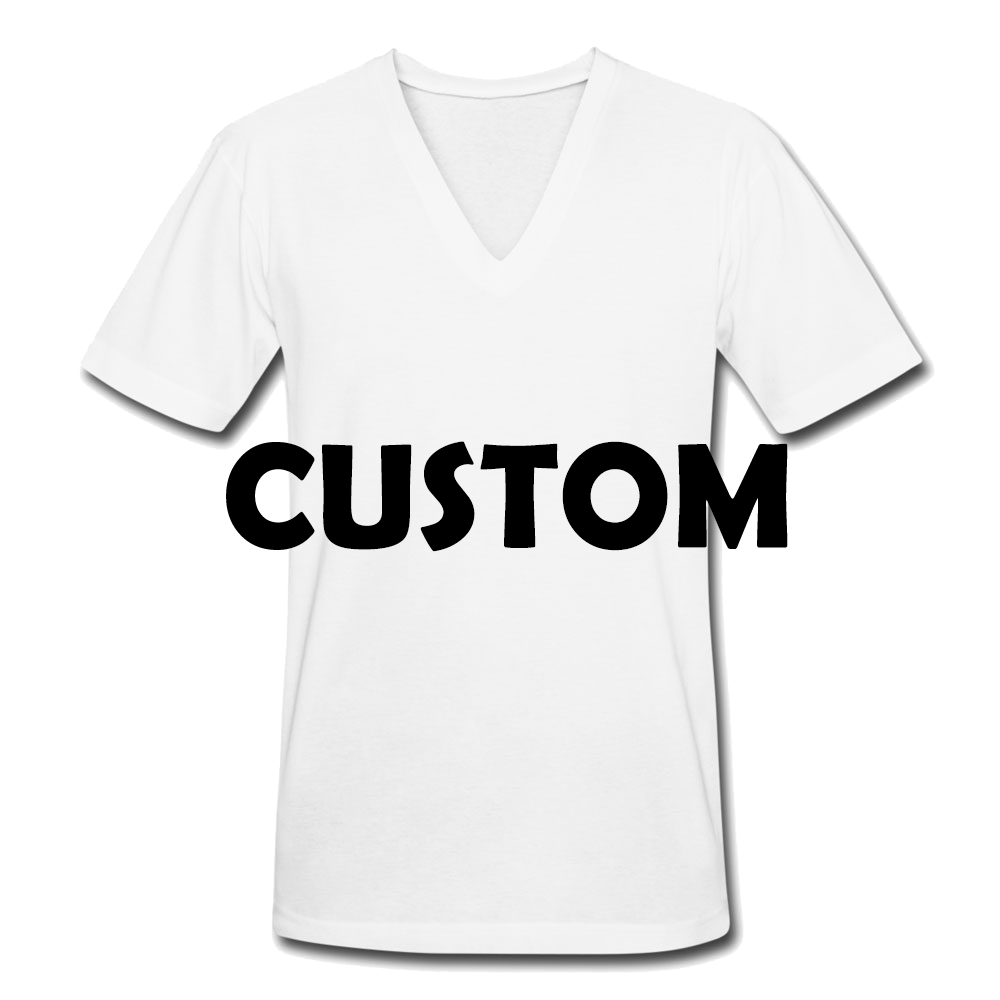
<style>
.page{position:relative;width:1000px;height:1000px;background:#ffffff}
.page>*{position:absolute;margin:0}
.t1{font:150px "BerlinSansFBDemi-Bold";color:#000000}
</style>
<div class="page">
<p class="t1" style="left:226px;top:441px;width:562px;height:111px">CUSTOM</p>
</div>
